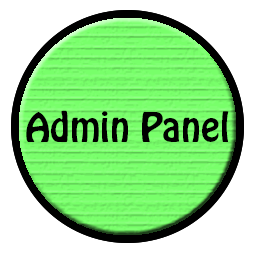
<style>
.page{position:relative;width:256px;height:256px;background:#ffffff}
.page>*{position:absolute;margin:0}
.t1{font:36px "HoboStd";color:#000000}
</style>
<div class="page">
<p class="t1" style="left:26px;top:110px;width:203px;height:32px">Admin Panel</p>
</div>
